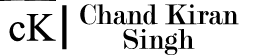
<style>
.page{position:relative;width:256px;height:56px;background:#ffffff}
.page>*{position:absolute;margin:0}
.t1{font:71.6px "Microsoft-Himalaya";color:#000000;scale:1.98 1}
.t2{font:30px "Modern-Regular";color:#000000}
.t3{font:60px "Microsoft-Himalaya";color:#000000}
</style>
<div class="page">
<p class="t1" style="left:62px;top:5px;width:5px;height:45px">|</p>
<p class="t2" style="left:80px;top:4px;width:159px;height:21px">Chand Kiran</p>
<p class="t3" style="left:9px;top:14px;width:47px;height:28px">cK</p>
<p class="t2" style="left:123px;top:29px;width:72px;height:26px">Singh</p>
</div>
